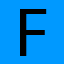
<style>
.page{position:relative;width:64px;height:64px;background:#0099ff}
.page>*{position:absolute;margin:0}
.t1{font:66.7px "DengXian-Regular";color:#000000;font-weight:bold}
</style>
<div class="page">
<p class="t1" style="left:20px;top:9px;width:27px;height:47px">F</p>
</div>
